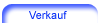
<style>
.page{position:relative;width:100px;height:23px;background:#ffffff}
.page>*{position:absolute;margin:0}
.t1{font:11px "ArialMT";color:#092ff6}
</style>
<div class="page">
<p class="t1" style="left:29px;top:11px;width:38px;height:8px">Verkauf</p>
</div>
